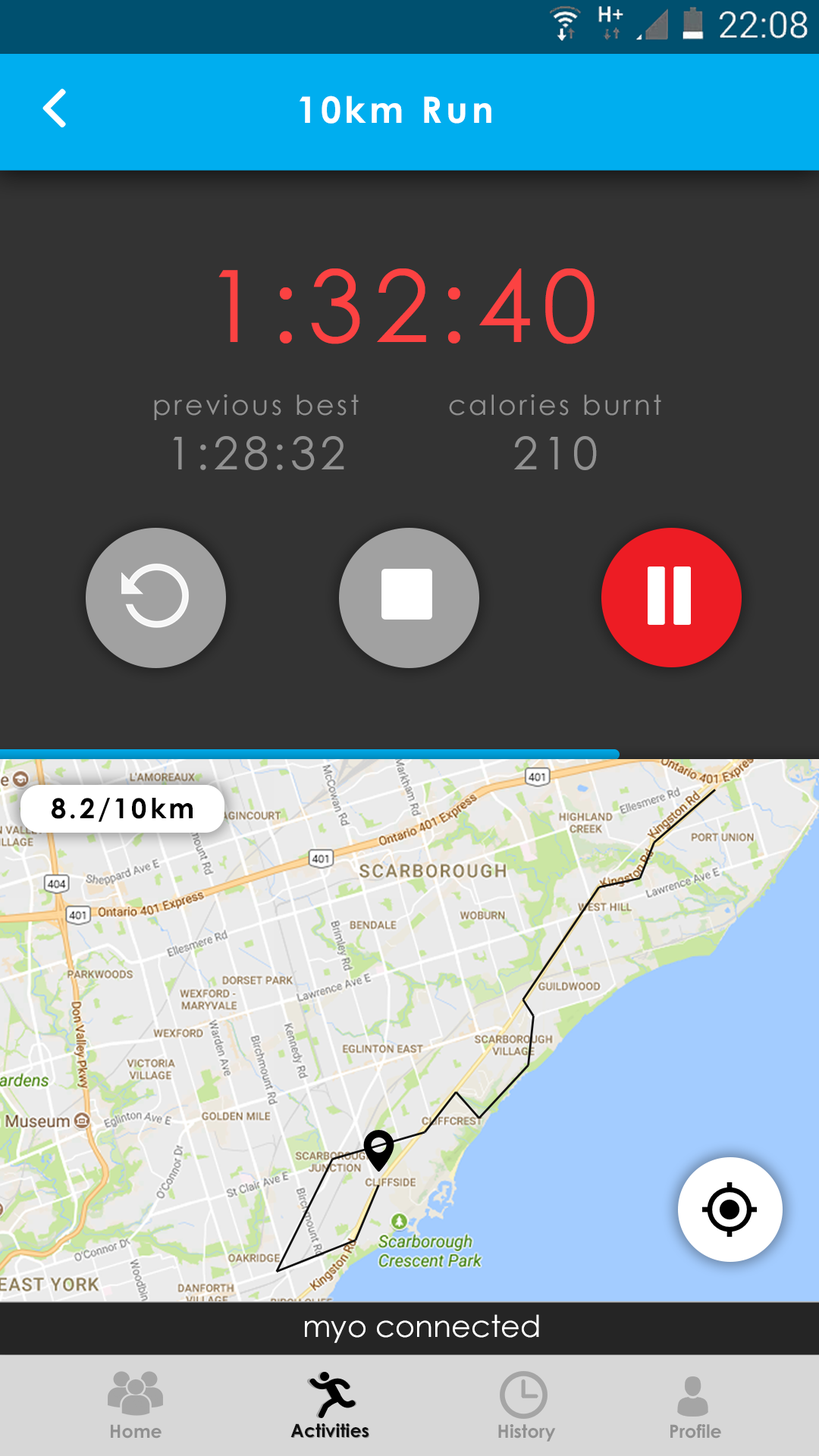
<style>
.page{position:relative;width:819px;height:1456px;background:#333333}
.page>*{position:absolute;margin:0}
.t1{font:36.4px "CenturyGothic-Bold";letter-spacing:0.1em;color:#ffffff}
.t2{font:100.1px "CenturyGothic";letter-spacing:0.1em;color:#fc4242}
.t3{font:27.3px "CenturyGothic";letter-spacing:0.1em;color:#919191}
.t4{font:45.5px "CenturyGothic";letter-spacing:0.1em;color:#919191}
.t5{font:27.6px "CenturyGothic-Bold";letter-spacing:0.1em;color:#000000}
.t6{font:30.2px "CenturyGothic";color:#ffffff}
.t7{font:18.2px "CenturyGothic-Bold";color:#919191}
.t8{font:18.2px "CenturyGothic-Bold";color:#111111}
.t9{font:18.2px "CenturyGothic-Bold"}
</style>
<div class="page">
<p class="t1" style="left:300px;top:96px;width:191px;height:28px">10km Run</p>
<p class="t2" style="left:218px;top:268px;width:377px;height:76px">1:32:40</p>
<p class="t3" style="left:154px;top:394px;width:205px;height:76px;text-align:center">previous best<br><span class="t4">1:28:32</span></p>
<p class="t3" style="left:449px;top:394px;width:212px;height:76px;text-align:center">calories burnt<br><span class="t4">210</span></p>
<p class="t5" style="left:52px;top:798px;width:141px;height:24px">8.2/10km</p>
<p class="t6" style="left:305px;top:1314px;width:234px;height:29px">myo connected</p>
<p class="t7" style="left:111px;top:1424px;width:51px;height:15px">Home</p>
<p class="t8" style="left:290px;top:1423px;width:79px;height:15px">Activities</p>
<p class="t9" style="left:291px;top:1424px;width:78px;height:15px">Activities</p>
<p class="t7" style="left:498px;top:1424px;width:58px;height:18px">History</p>
<p class="t7" style="left:670px;top:1424px;width:51px;height:15px">Profile</p>
</div>
